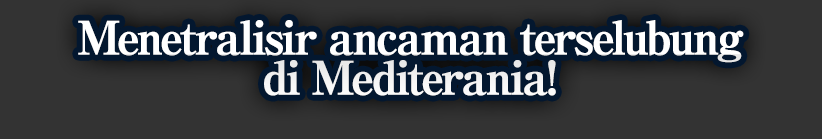
<style>
.page{position:relative;width:822px;height:139px;background:#333333}
.page>*{position:absolute;margin:0}
.t1{font:46px/40px "RyuminPro-ExBold";letter-spacing:-0.08em;color:#ffffff;font-weight:bold}
</style>
<div class="page">
<p class="t1" style="left:78px;top:20px;width:666px;height:76px;text-align:center">Menetralisir ancaman terselubung<br>di Mediterania!</p>
</div>
